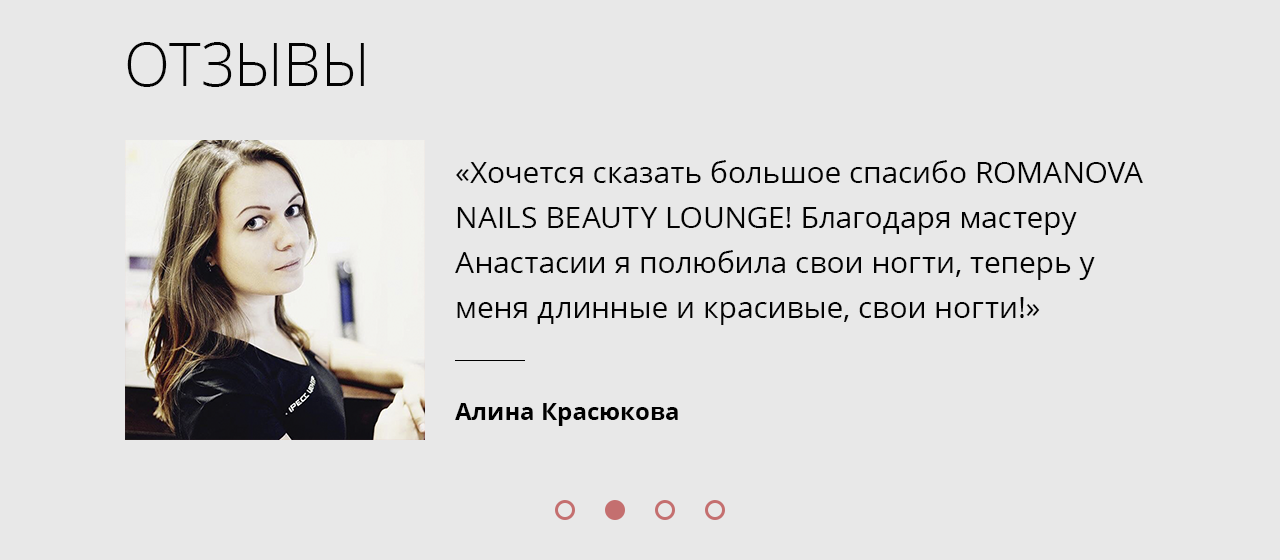
<style>
.page{position:relative;width:1280px;height:560px;background:#e8e8e8}
.page>*{position:absolute;margin:0}
.t1{font:60px "OpenSans-Light";color:#030303}
.t2{font:30px/45px "OpenSans";color:#030303}
.t3{font:24px "OpenSans-Bold";color:#000000}
</style>
<div class="page">
<p class="t1" style="left:127px;top:42px;width:237px;height:45px">ОТЗЫВЫ</p>
<p class="t2" style="left:455px;top:160px;width:688px;height:165px">«Хочется сказать большое спасибо ROMANOVA NAILS BEAUTY LOUNGE! Благодаря мастеру Анастасии я полюбила свои ногти, теперь у меня длинные и красивые, свои ногти!»</p>
<p class="t3" style="left:455px;top:403px;width:223px;height:23px">Алина Красюкова</p>
</div>
